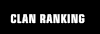
<style>
.page{position:relative;width:100px;height:34px;background:#000000}
.page>*{position:absolute;margin:0}
.t1{font:12px "Eurostile-CondensedBold";letter-spacing:0.02em;color:#ffffff}
</style>
<div class="page">
<p class="t1" style="left:10px;top:14px;width:75px;height:10px">CLAN RANKING</p>
</div>
